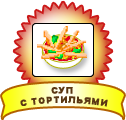
<style>
.page{position:relative;width:126px;height:120px;background:#ffffff}
.page>*{position:absolute;margin:0}
.t1{font:9px/9.4px "Arial-Black";letter-spacing:0.045em;color:#5b3714;text-transform:uppercase}
</style>
<div class="page">
<p class="t1" style="left:20px;top:86px;width:88px;height:21px;text-align:center">Суп <br>с тортильями</p>
</div>
